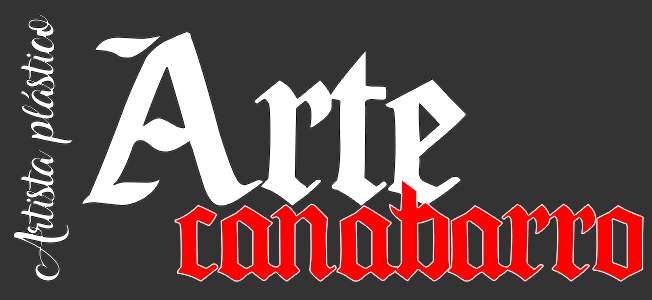
<style>
.page{position:relative;width:652px;height:300px;background:#333333}
.page>*{position:absolute;margin:0}
.t1{font:29.4px "Amarillo";letter-spacing:-0.04em;color:#ffffff}
.t2{font:213.7px "Seagramtfb";letter-spacing:-0.04em;color:#ffffff}
.t3{font:130.3px "Seagramtfb";letter-spacing:-0.04em;color:#ff0000}
</style>
<div class="page">
<p class="t1" style="left:13px;top:14px;width:60px;height:267px;rotate:-90deg">Artista plástico</p>
<p class="t2" style="left:82px;top:31px;width:385px;height:175px">Arte</p>
<p class="t3" style="left:175px;top:179px;width:469px;height:102px">canabarro</p>
</div>
